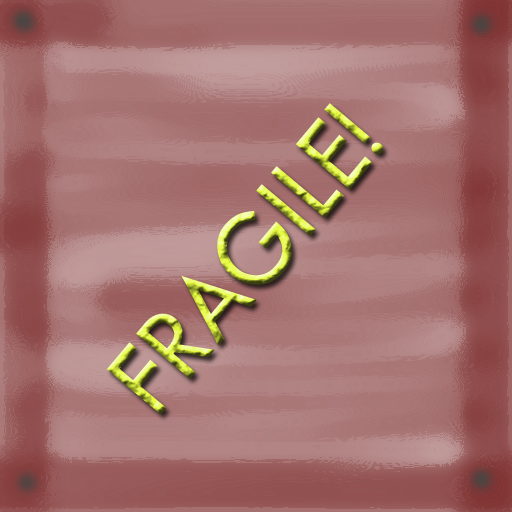
<style>
.page{position:relative;width:512px;height:512px}
.page>*{position:absolute;margin:0}
.t1{font:113.3px "TwCenMT-Regular";scale:0.9 1}
</style>
<div class="page">
<p class="t1" style="left:106px;top:103px;width:277px;height:312px;rotate:-50deg">FRAGILE!</p>
</div>
